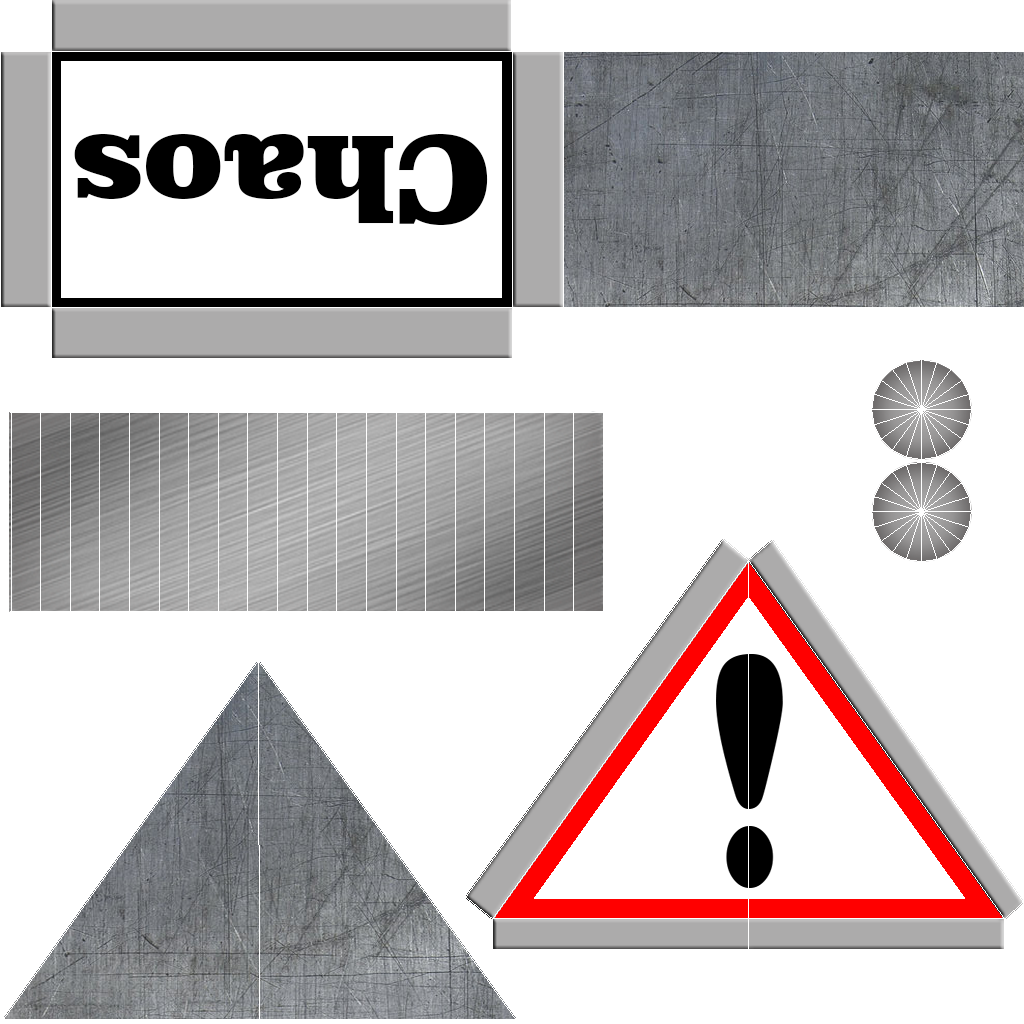
<style>
.page{position:relative;width:1024px;height:1024px;background:#ffffff}
.page>*{position:absolute;margin:0}
.t1{font:130px "ClarendonBT-Black";color:#000000}
</style>
<div class="page">
<p class="t1" style="left:74px;top:134px;width:414px;height:91px;rotate:-180deg">Chaos</p>
</div>
